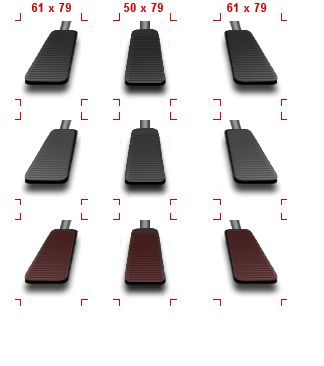
<style>
.page{position:relative;width:324px;height:366px;background:#ffffff}
.page>*{position:absolute;margin:0}
.t1{font:12.1px "ArialNarrow-Bold";letter-spacing:0.05em;color:#cd0505;scale:1.09 1}
</style>
<div class="page">
<p class="t1" style="left:31px;top:3px;width:236px;height:9px">61 x 79              50 x 79                 61 x 79</p>
</div>
